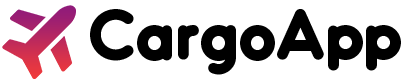
<style>
.page{position:relative;width:404px;height:83px;background:#ffffff}
.page>*{position:absolute;margin:0}
.t1{font:68.6px "Oduda-Bold";letter-spacing:-0.01em;color:#000000}
</style>
<div class="page">
<p class="t1" style="left:90px;top:9px;width:311px;height:66px">CargoApp</p>
</div>
